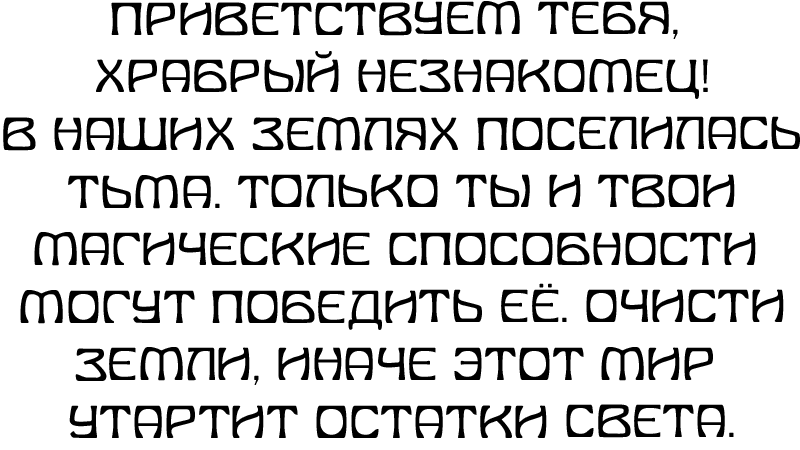
<style>
.page{position:relative;width:800px;height:450px;background:#ffffff}
.page>*{position:absolute;margin:0}
.t1{font:48px "HerculesModern";color:#000000}
</style>
<div class="page">
<p class="t1" style="left:3px;top:1px;width:797px;height:437px;text-align:center">Приветствуем тебя, <br>храбрый незнакомец!<br>В наших землях поселилась<br>тьма. Только ты и твои<br>магические способности <br>могут победить её. Очисти<br>земли, иначе этот мир <br>утартит остатки света.</p>
</div>
